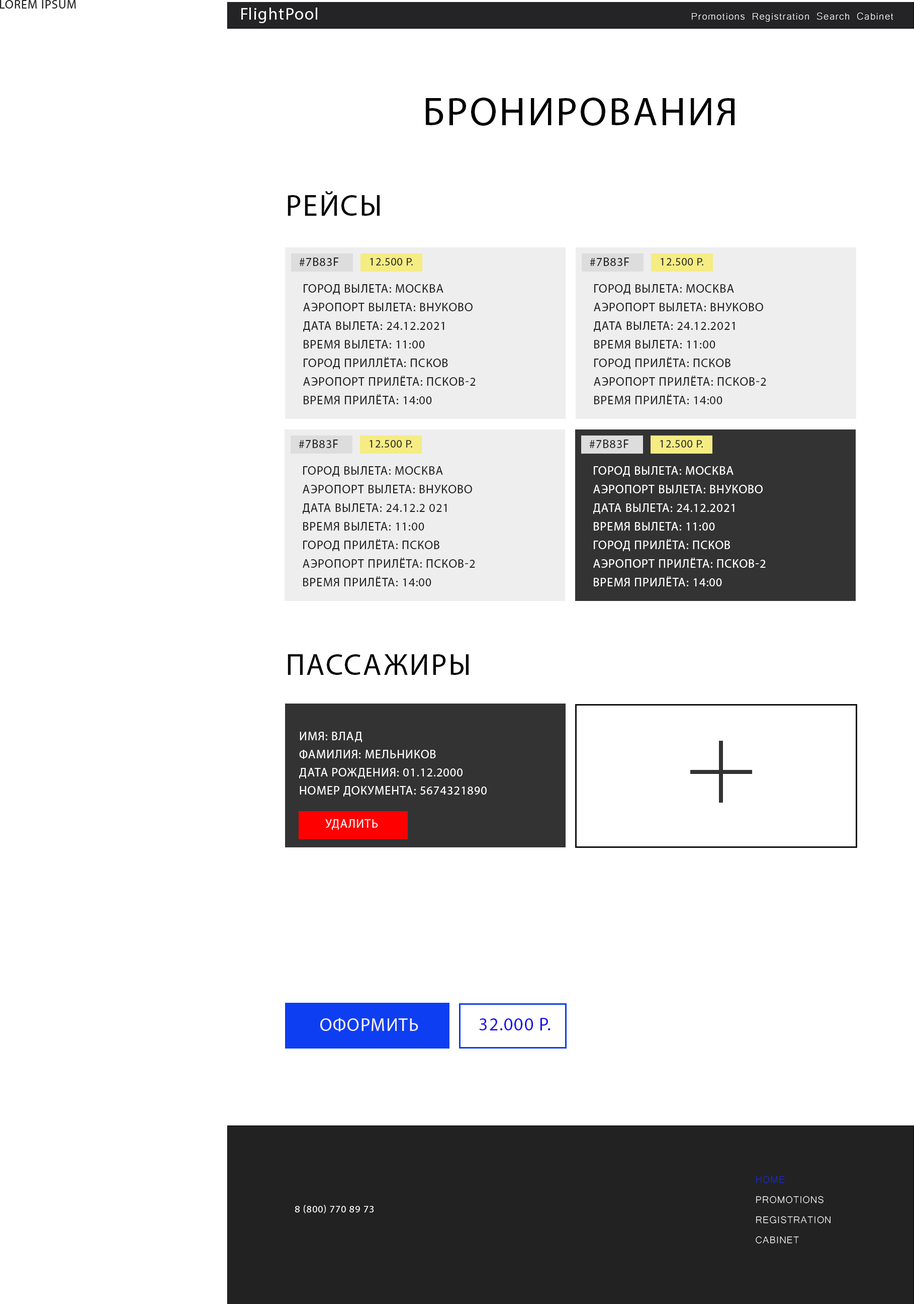
<style>
.page{position:relative;width:914px;height:1304px;background:#ffffff}
.page>*{position:absolute;margin:0}
.t1{font:12.1px "MyriadPro-Regular";letter-spacing:0.05em;color:#222222;text-transform:uppercase}
.t2{font:16.9px "MyriadPro-Regular";letter-spacing:0.05em;color:#ffffff}
.t3{font:12.7px "Microsoft-Yi-Baiti";letter-spacing:0.05em;color:#ffffff}
.t4{font:40.2px "MyriadPro-Regular";letter-spacing:0.05em;color:#000000;text-transform:uppercase}
.t5{font:30.2px "MyriadPro-Regular";letter-spacing:0.05em;color:#000000;text-transform:uppercase}
.t6{font:11.1px "MyriadPro-Regular";letter-spacing:0.05em;color:#222222;text-transform:uppercase}
.t7{font:12.1px/18.6px "MyriadPro-Regular";letter-spacing:0.05em;color:#222222;text-transform:uppercase}
.t8{font:12.1px/18.6px "MyriadPro-Regular";letter-spacing:0.05em;color:#ffffff;text-transform:uppercase}
.t9{font:12.1px/18.1px "MyriadPro-Regular";letter-spacing:0.05em;color:#ffffff;text-transform:uppercase}
.t10{font:12.1px "MyriadPro-Regular";letter-spacing:0.05em;color:#f5f1f1;text-transform:uppercase}
.t11{font:18.1px "MyriadPro-Regular";letter-spacing:0.05em;color:#f5f1f1;text-transform:uppercase}
.t12{font:18.1px "MyriadPro-Regular";letter-spacing:0.05em;color:#1b11ec;text-transform:uppercase}
.t13{font:12.1px/20.2px "Microsoft-Yi-Baiti";letter-spacing:0.05em;color:#ffffff;text-transform:uppercase}
.t14{font:12.1px/20.2px "Microsoft-Yi-Baiti";letter-spacing:0.05em;color:#1129e0;text-transform:uppercase}
.t15{font:10.1px "MyriadPro-Regular";letter-spacing:0.05em;color:#ffffff;text-transform:uppercase}
</style>
<div class="page">
<p class="t1" style="left:0px;top:0px;width:76px;height:9px">Lorem Ipsum</p>
<p class="t2" style="left:241px;top:8px;width:76px;height:15px">FlightPool</p>
<p class="t3" style="left:692px;top:13px;width:202px;height:9px">Promotions Registration Search Cabinet</p>
<p class="t4" style="left:426px;top:98px;width:309px;height:28px">БРОНИРОВАНИЯ</p>
<p class="t5" style="left:288px;top:191px;width:92px;height:25px">РЕЙСЫ</p>
<p class="t1" style="left:299px;top:258px;width:39px;height:8px">#7B83F</p>
<p class="t1" style="left:590px;top:258px;width:39px;height:8px">#7B83F</p>
<p class="t6" style="left:370px;top:258px;width:43px;height:8px">12.500 р.</p>
<p class="t6" style="left:661px;top:258px;width:43px;height:8px">12.500 р.</p>
<p class="t7" style="left:303px;top:284px;width:173px;height:120px">Город вылета: москва<br>аЭРОПОРТ ВЫЛЕТА: ВНУКОВО<br>ДАТА ВЫЛЕТА: 24.12.2021<br>ВРЕМЯ ВЫЛЕТА: 11:00<br>ГОРОД ПРИЛлЁТА: ПСКОВ<br>АЭРОПОРТ ПРИЛЁТА: ПСКОВ-2<br>ВРЕМЯ ПРИЛЁТА: 14:00</p>
<p class="t7" style="left:594px;top:284px;width:172px;height:120px">Город вылета: москва<br>аЭРОПОРТ ВЫЛЕТА: ВНУКОВО<br>ДАТА ВЫЛЕТА: 24.12.2021<br>ВРЕМЯ ВЫЛЕТА: 11:00<br>ГОРОД ПРИЛЁТА: ПСКОВ<br>АЭРОПОРТ ПРИЛЁТА: ПСКОВ-2<br>ВРЕМЯ ПРИЛЁТА: 14:00</p>
<p class="t1" style="left:299px;top:440px;width:39px;height:8px">#7B83F</p>
<p class="t6" style="left:370px;top:440px;width:42px;height:8px">12.500 р.</p>
<p class="t1" style="left:589px;top:440px;width:40px;height:8px">#7B83F</p>
<p class="t6" style="left:660px;top:440px;width:43px;height:8px">12.500 р.</p>
<p class="t7" style="left:303px;top:466px;width:172px;height:120px">Город вылета: москва<br>аЭРОПОРТ ВЫЛЕТА: ВНУКОВО<br>ДАТА ВЫЛЕТА: 24.12.2 021<br>ВРЕМЯ ВЫЛЕТА: 11:00<br>ГОРОД ПРИЛЁТА: ПСКОВ<br>АЭРОПОРТ ПРИЛЁТА: ПСКОВ-2<br>ВРЕМЯ ПРИЛЁТА: 14:00</p>
<p class="t8" style="left:593px;top:466px;width:173px;height:120px">Город вылета: москва<br>аЭРОПОРТ ВЫЛЕТА: ВНУКОВО<br>ДАТА ВЫЛЕТА: 24.12.2021<br>ВРЕМЯ ВЫЛЕТА: 11:00<br>ГОРОД ПРИЛЁТА: ПСКОВ<br>АЭРОПОРТ ПРИЛЁТА: ПСКОВ-2<br>ВРЕМЯ ПРИЛЁТА: 14:00</p>
<p class="t5" style="left:288px;top:654px;width:181px;height:21px">ПАССАЖИРЫ</p>
<p class="t9" style="left:299px;top:732px;width:188px;height:65px">Имя: ВЛАД<br>Фамилия: МЕЛЬНИКОВ<br>Дата рождения: 01.12.2000<br>Номер документа: 5674321890</p>
<p class="t10" style="left:325px;top:819px;width:53px;height:11px">УДалить</p>
<p class="t11" style="left:320px;top:1018px;width:98px;height:14px">ОФОРМИТЬ</p>
<p class="t12" style="left:479px;top:1018px;width:72px;height:13px">32.000 Р.</p>
<p class="t13" style="left:756px;top:1176px;width:75px;height:68px"><span class="t14">Home</span> <br>Promotions<br>registration<br>Cabinet</p>
<p class="t15" style="left:295px;top:1205px;width:79px;height:9px">8 (800) 770 89 73</p>
</div>
